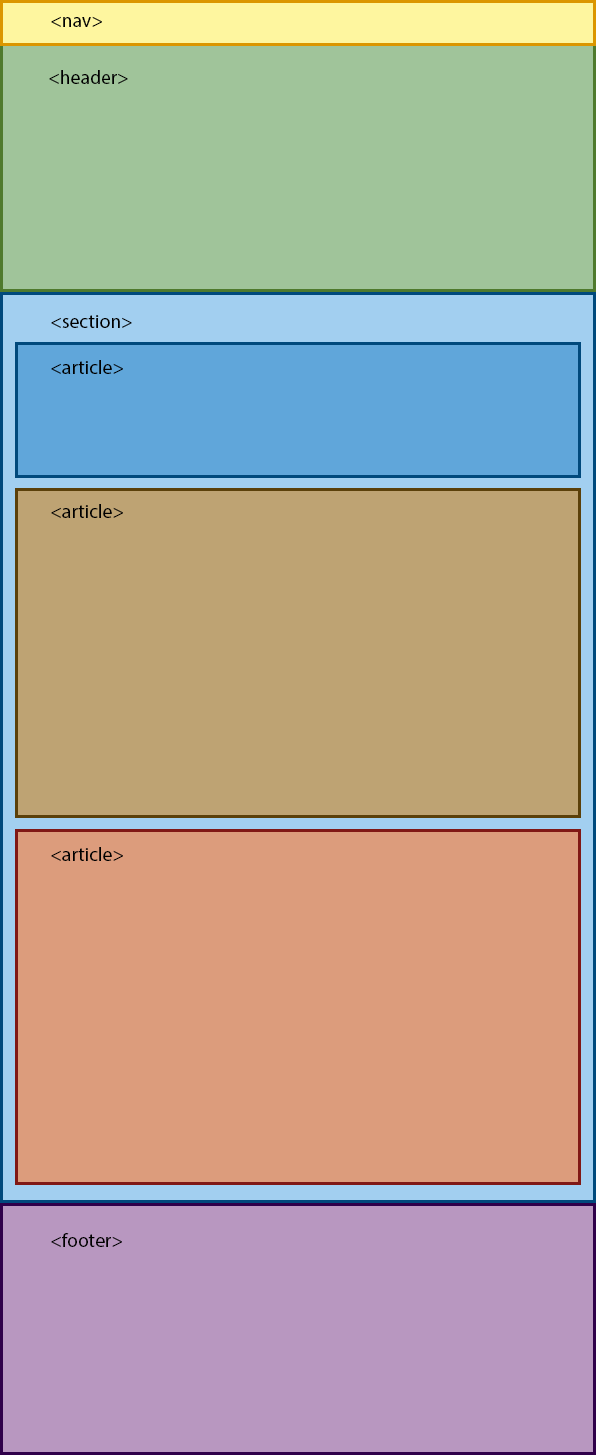
<style>
.page{position:relative;width:596px;height:1455px;background:#dc9c7c}
.page>*{position:absolute;margin:0}
.t1{font:19.3px "MyriadPro-Regular";color:#000000}
</style>
<div class="page">
<p class="t1" style="left:51px;top:16px;width:51px;height:11px">&lt;nav&gt;</p>
<p class="t1" style="left:49px;top:70px;width:79px;height:14px">&lt;header&gt;</p>
<p class="t1" style="left:51px;top:315px;width:81px;height:13px">&lt;section&gt;</p>
<p class="t1" style="left:51px;top:360px;width:72px;height:14px">&lt;article&gt;</p>
<p class="t1" style="left:51px;top:504px;width:72px;height:14px">&lt;article&gt;</p>
<p class="t1" style="left:51px;top:847px;width:72px;height:14px">&lt;article&gt;</p>
<p class="t1" style="left:51px;top:1233px;width:71px;height:14px">&lt;footer&gt;</p>
</div>
